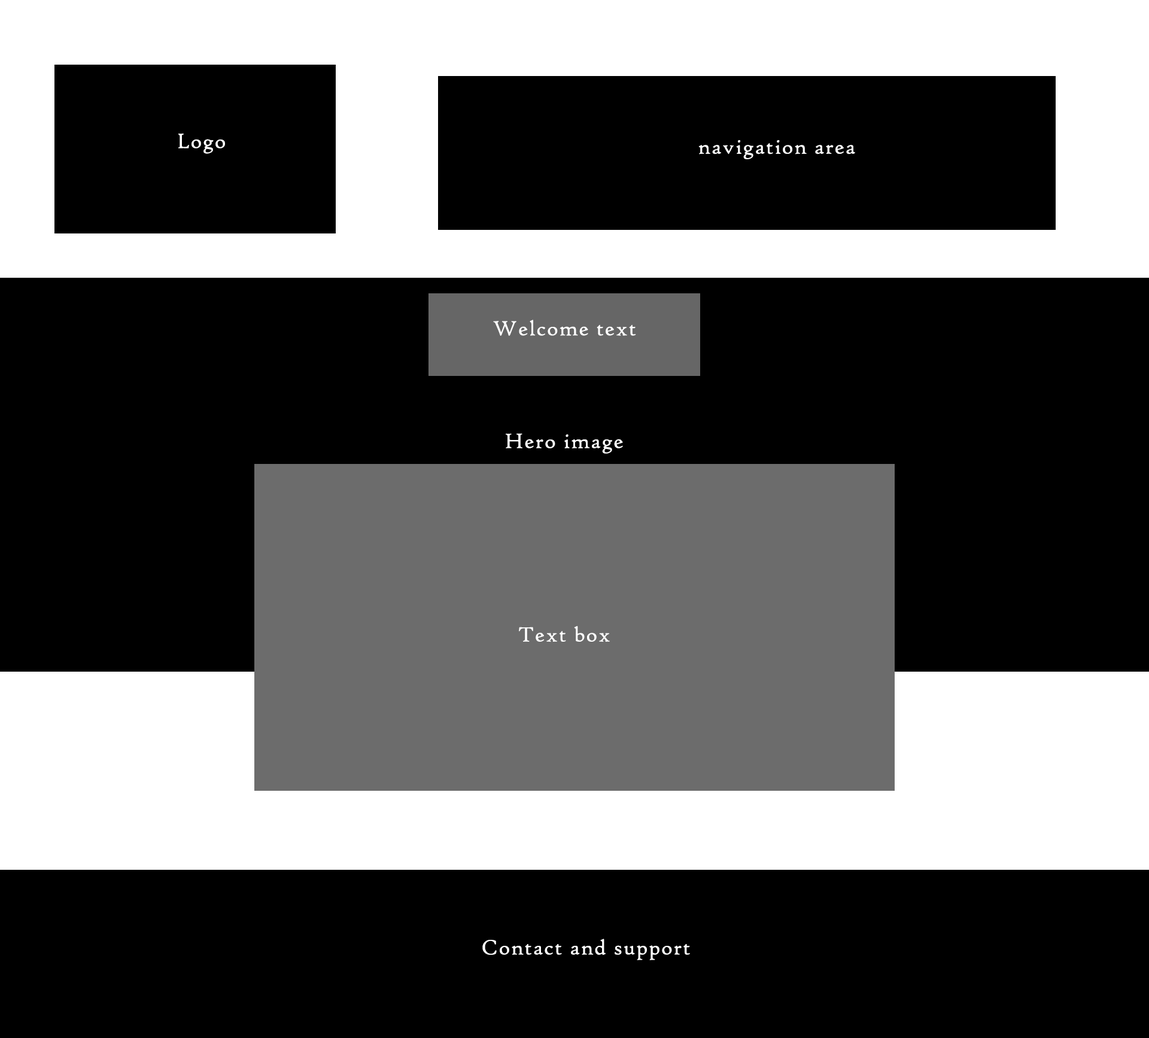
<style>
.page{position:relative;width:1149px;height:1038px;background:#000000}
.page>*{position:absolute;margin:0}
.t1{font:22.1px "HighTowerText-Reg";letter-spacing:0.05em;color:#ffffff}
</style>
<div class="page">
<p class="t1" style="left:178px;top:133px;width:47px;height:21px">Logo</p>
<p class="t1" style="left:698px;top:140px;width:157px;height:19px">navigation area</p>
<p class="t1" style="left:493px;top:320px;width:143px;height:16px">Welcome text</p>
<p class="t1" style="left:506px;top:433px;width:117px;height:21px">Hero image</p>
<p class="t1" style="left:519px;top:625px;width:91px;height:17px">Text box</p>
<p class="t1" style="left:482px;top:938px;width:208px;height:22px">Contact and support</p>
</div>
